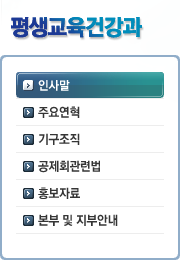
<style>
.page{position:relative;width:180px;height:260px;background:#ffffff}
.page>*{position:absolute;margin:0}
.t1{font:22px "RixGoEB";letter-spacing:-0.05em}
.t2{font:12.6px/27px "Ray-YDG550";letter-spacing:-0.025em;color:#353535;scale:0.95 1}
.t3{font:12px "Ray-YDG550";letter-spacing:-0.025em;color:#ffffff}
</style>
<div class="page">
<p class="t1" style="left:11px;top:17px;width:131px;height:21px">평생교육건강과</p>
<p class="t2" style="left:38px;top:79px;width:80px;height:147px">인사말<br>주요연혁<br>기구조직<br>공제회관련법<br>홍보자료<br>본부 및 지부안내</p>
<p class="t3" style="left:38px;top:80px;width:32px;height:11px">인사말</p>
</div>
